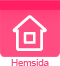
<style>
.page{position:relative;width:60px;height:66px;background:#ff4c81}
.page>*{position:absolute;margin:0}
.t1{font:9.6px "ArialMT";color:#ff467d}
</style>
<div class="page">
<p class="t1" style="left:11px;top:59px;width:38px;height:7px">Hemsida</p>
</div>
